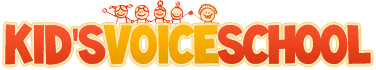
<style>
.page{position:relative;width:376px;height:70px;background:#ffffff}
.page>*{position:absolute;margin:0}
.t1{font:49.6px "Toonish";letter-spacing:-0.02em;color:#ea451e}
.t2{font:49.6px "Toonish";letter-spacing:-0.02em;color:#ef4a23}
.t3{font:49.6px "MyriadPro-Regular";letter-spacing:-0.02em;color:#ef4a23}
.t4{font:49.6px "Toonish";letter-spacing:-0.02em;color:#ffc700}
.t5{font:49.6px "Toonish";letter-spacing:-0.02em;color:#f7ab01}
</style>
<div class="page">
<p class="t1" style="left:5px;top:23px;width:366px;height:42px;opacity:0.55"><span class="t2">Kid</span><span class="t3">'</span><span class="t2">s</span><span class="t4">Voice</span>School</p>
<p class="t1" style="left:5px;top:23px;width:366px;height:42px;opacity:0.55"><span class="t2">Kid</span><span class="t3">'</span><span class="t2">s</span><span class="t4">Voice</span>School</p>
<p class="t1" style="left:5px;top:23px;width:366px;height:42px"><span class="t2">Kid</span><span class="t3">'</span><span class="t2">s</span><span class="t5">Voice</span>School</p>
</div>
